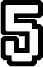
<style>
.page{position:relative;width:43px;height:67px;background:#000000}
.page>*{position:absolute;margin:0}
.t1{font:72px "Cubic_11";letter-spacing:0.1em;color:#ffffff;font-weight:bold}
</style>
<div class="page">
<p class="t1" style="left:5px;top:5px;width:33px;height:57px">5</p>
</div>
